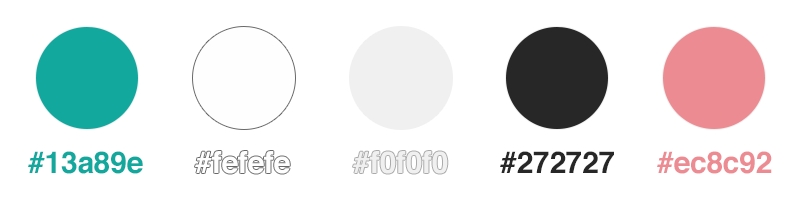
<style>
.page{position:relative;width:800px;height:200px;background:#ffffff}
.page>*{position:absolute;margin:0}
.t1{font:30px "Helvetica-Bold";letter-spacing:-0.01em;color:#13a89e}
.t2{font:30px "Helvetica-Bold";letter-spacing:-0.01em;color:#fefefe}
.t3{font:30px "Helvetica-Bold";letter-spacing:-0.01em;color:#272727}
.t4{font:30px "Helvetica-Bold";letter-spacing:-0.01em;color:#ec8c92}
</style>
<div class="page">
<p class="t1" style="left:28px;top:151px;width:115px;height:23px">#13a89e</p>
<p class="t2" style="left:195px;top:151px;width:95px;height:23px">#fefefe</p>
<p class="t3" style="left:500px;top:151px;width:114px;height:22px">#272727</p>
<p class="t4" style="left:657px;top:151px;width:115px;height:23px">#ec8c92</p>
</div>
